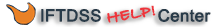
<style>
.page{position:relative;width:213px;height:27px;background:#ffffff}
.page>*{position:absolute;margin:0}
.t1{font:16.7px "BradleyHandITCTT-Bold";color:#ee343b;font-weight:bold}
.t2{font:16.7px "ArialMT";color:#293b49;font-weight:bold}
</style>
<div class="page">
<p class="t1" style="left:107px;top:5px;width:49px;height:18px;rotate:-9deg">HELP!</p>
<p class="t2" style="left:41px;top:9px;width:170px;height:13px">IFTDSS           Center</p>
</div>
